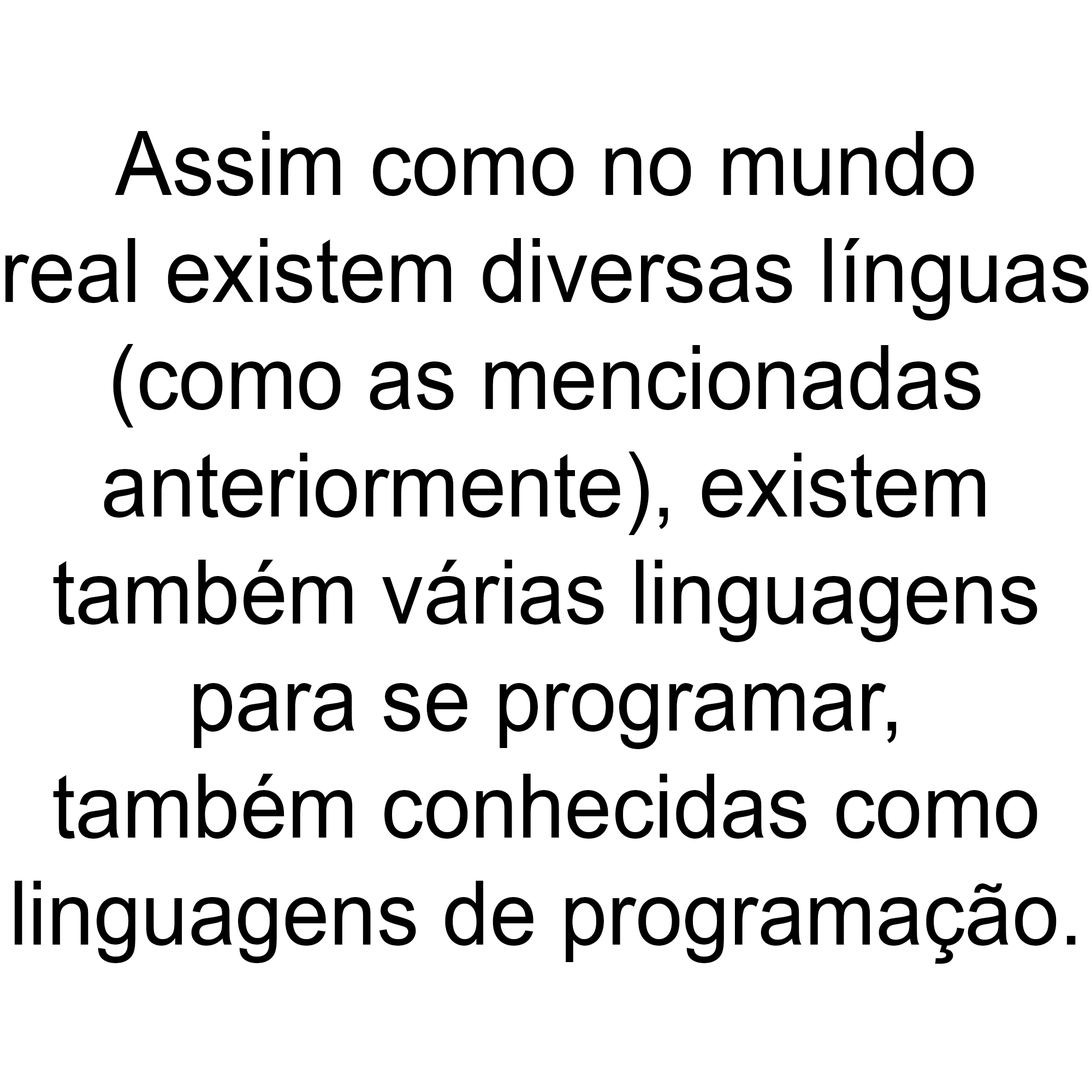
<style>
.page{position:relative;width:1092px;height:1092px;background:#ffffff}
.page>*{position:absolute;margin:0}
.t1{font:89.2px "ArialMT";color:#000000;scale:0.95 1}
</style>
<div class="page">
<p class="t1" style="left:5px;top:131px;width:1084px;height:833px;text-align:center">Assim como no mundo<br>real existem diversas línguas<br>(como as mencionadas<br>anteriormente), existem<br>também várias linguagens<br>para se programar,<br>também conhecidas como<br>linguagens de programação.</p>
</div>
